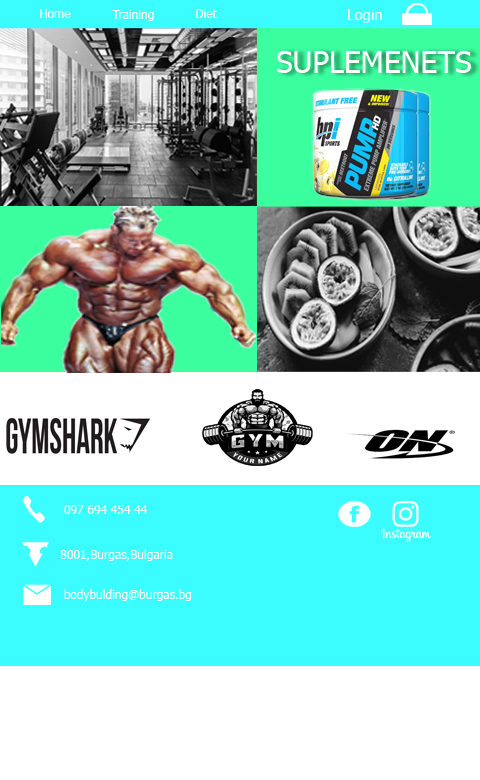
<style>
.page{position:relative;width:480px;height:780px;background:#ffffff}
.page>*{position:absolute;margin:0}
.t1{font:12px "Tahoma";color:#ffffff}
.t2{font:15px "Tahoma";color:#ffffff}
.t3{font:30px "Tahoma";color:#ffffff}
</style>
<div class="page">
<p class="t1" style="left:40px;top:9px;width:31px;height:9px">Home</p>
<p class="t1" style="left:112px;top:10px;width:42px;height:11px">Training</p>
<p class="t1" style="left:196px;top:9px;width:21px;height:9px">Diet</p>
<p class="t2" style="left:348px;top:9px;width:34px;height:14px">Login</p>
<p class="t3" style="left:277px;top:51px;width:194px;height:22px">SUPLEMENETS</p>
<p class="t1" style="left:64px;top:505px;width:84px;height:9px">097 694 454 44</p>
<p class="t1" style="left:60px;top:549px;width:113px;height:12px">8001,Burgas,Bulgaria</p>
<p class="t1" style="left:64px;top:589px;width:128px;height:12px">bodybulding@burgas.bg</p>
</div>
